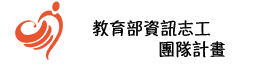
<style>
.page{position:relative;width:270px;height:70px;background:#ffffff}
.page>*{position:absolute;margin:0}
.t1{font:16.7px/20.8px "HannotateTC-W5";color:#000000;font-weight:bold}
</style>
<div class="page">
<p class="t1" style="left:92px;top:20px;width:133px;height:38px">教育部資訊志工<br>           團隊計畫</p>
</div>
